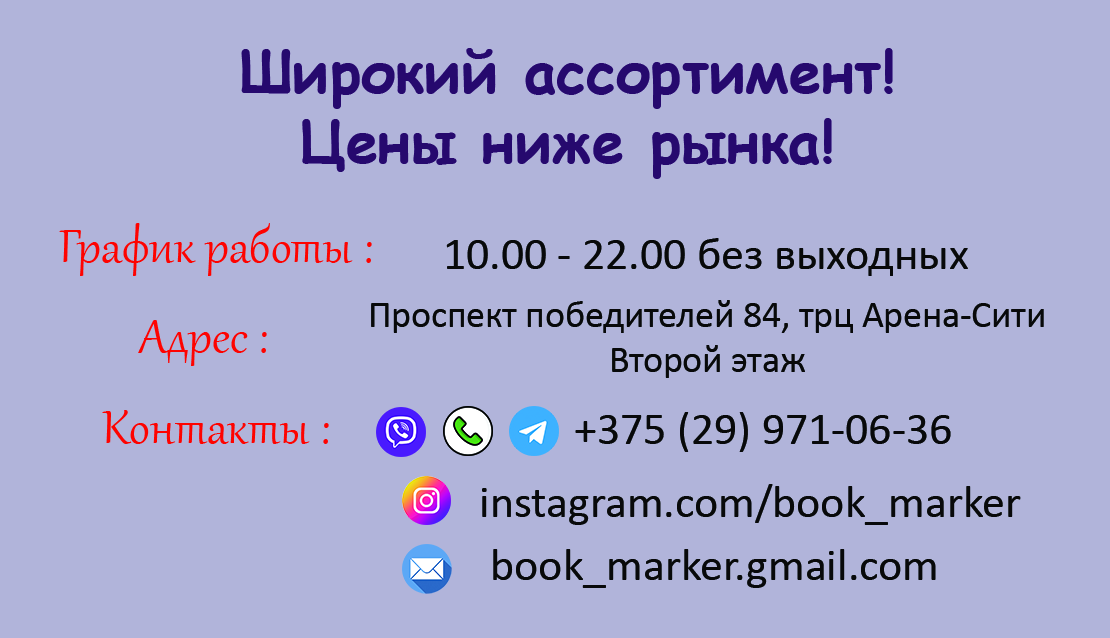
<style>
.page{position:relative;width:1110px;height:638px;background:#b1b4da}
.page>*{position:absolute;margin:0}
.t1{font:58.3px "ComicSansMS-Bold";color:#26096e}
.t2{font:58.3px "Gabriola";color:#fe0300}
.t3{font:45.8px "Calibri";color:#08090a}
.t4{font:37.5px "Calibri";color:#08090a}
</style>
<div class="page">
<p class="t1" style="left:241px;top:48px;width:652px;height:131px;text-align:center">Широкий ассортимент!<br>Цены ниже рынка!</p>
<p class="t2" style="left:59px;top:223px;width:313px;height:53px">График работы :</p>
<p class="t3" style="left:446px;top:238px;width:522px;height:38px">10.00 - 22.00 без выходных</p>
<p class="t4" style="left:371px;top:300px;width:673px;height:78px;text-align:center">Проспект победителей 84, трц Арена-Сити<br>Второй этаж</p>
<p class="t2" style="left:138px;top:320px;width:129px;height:46px">Адрес :</p>
<p class="t2" style="left:102px;top:410px;width:227px;height:34px">Контакты :</p>
<p class="t3" style="left:575px;top:412px;width:376px;height:40px">+375 (29) 971-06-36</p>
<p class="t3" style="left:482px;top:484px;width:539px;height:41px">instagram.com/book_marker</p>
<p class="t3" style="left:493px;top:549px;width:443px;height:39px">book_marker.gmail.com</p>
</div>
